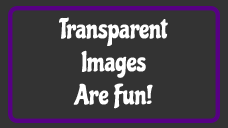
<style>
.page{position:relative;width:228px;height:128px;background:#333333}
.page>*{position:absolute;margin:0}
.t1{font:27.5px "Chicle-Regular";color:#ffffff}
</style>
<div class="page">
<p class="t1" style="left:59px;top:17px;width:109px;height:92px;text-align:center">Transparent<br>Images <br>Are Fun!</p>
</div>
